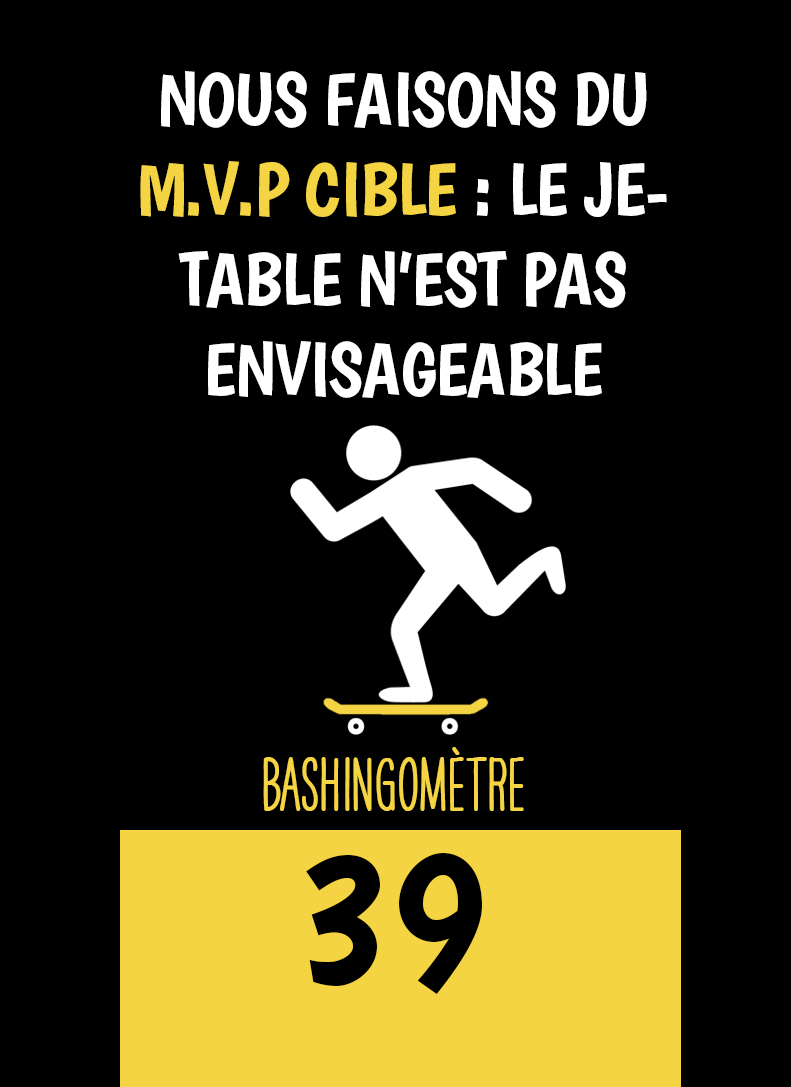
<style>
.page{position:relative;width:791px;height:1087px;background:#000000}
.page>*{position:absolute;margin:0}
.t1{font:75px "Boogaloo-Regular";letter-spacing:-0.02em;color:#ffffff}
.t2{font:75px "Boogaloo-Regular";letter-spacing:-0.02em;color:#f4d443}
.t3{font:66.7px "HAVEANICEDAYTallW04-Bold";color:#f4d443}
.t4{font:200px "Boogaloo-Regular";color:#000000}
</style>
<div class="page">
<p class="t1" style="left:140px;top:71px;width:527px;height:327px;text-align:center">NOUS FAISONS DU <span class="t2">M.V.P CIBLE</span> : LE JETABLE N’EST PAS <br>ENVISAGEABLE</p>
<p class="t3" style="left:263px;top:747px;width:261px;height:64px">BASHINgomètre</p>
<p class="t4" style="left:306px;top:853px;width:176px;height:141px">39</p>
</div>
